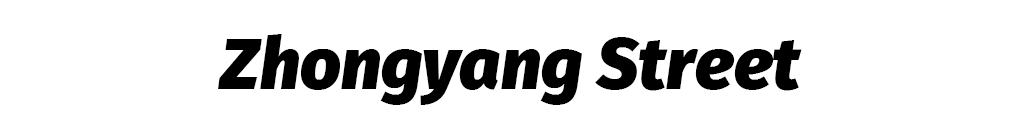
<style>
.page{position:relative;width:1024px;height:128px;background:#ffffff}
.page>*{position:absolute;margin:0}
.t1{font:71.8px "FiraSans-BlackItalic";color:#000000}
</style>
<div class="page">
<p class="t1" style="left:218px;top:34px;width:584px;height:71px">Zhongyang Street</p>
</div>
